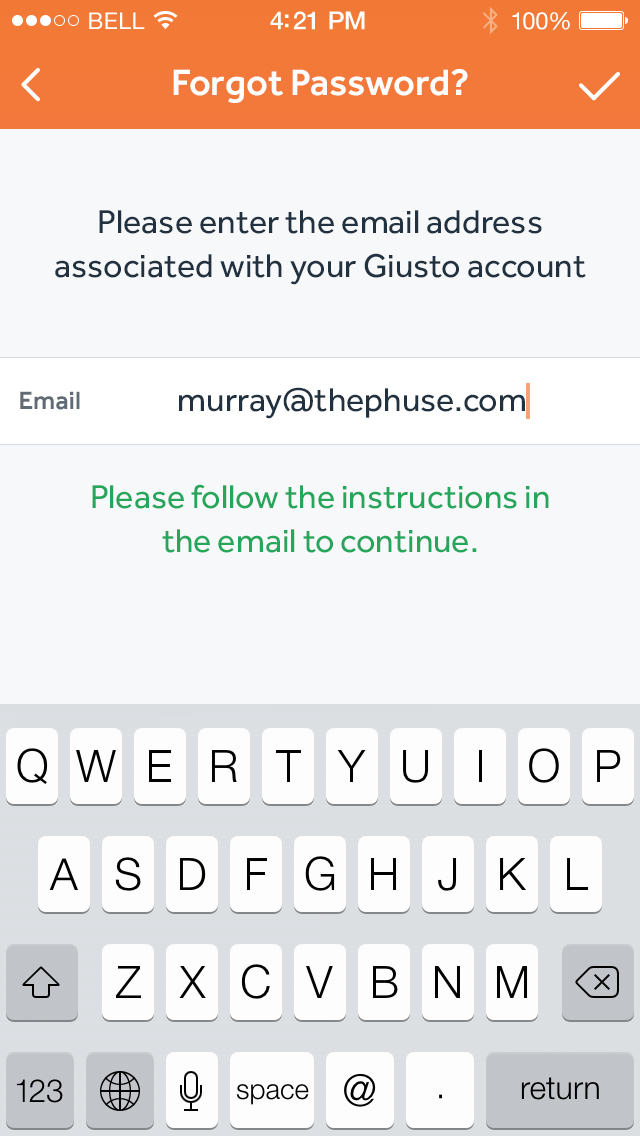
<style>
.page{position:relative;width:640px;height:1136px;background:#f6f8fa}
.page>*{position:absolute;margin:0}
.t1{font:23px "HelveticaNeue";letter-spacing:0.02em;color:#ffffff}
.t2{font:25px "HelveticaNeue-Medium";letter-spacing:-0.02em;color:#ffffff}
.t3{font:24px "HelveticaNeue";letter-spacing:-0.02em;color:#ffffff}
.t4{font:38px "Effra-Medium";color:#ffffff}
.t5{font:34px/44px "Effra-Regular";color:#22313f}
.t6{font:34px "Effra-Regular";color:#22313f}
.t7{font:26px "Effra-Medium";color:#626a73}
.t8{font:34px/44px "Effra-Regular";color:#26a65b}
</style>
<div class="page">
<p class="t1" style="left:89px;top:12px;width:56px;height:17px">BELL</p>
<p class="t2" style="left:270px;top:11px;width:95px;height:19px">4:21 PM</p>
<p class="t3" style="left:512px;top:12px;width:58px;height:18px">100%</p>
<p class="t4" style="left:173px;top:69px;width:295px;height:34px">Forgot Password?</p>
<p class="t5" style="left:55px;top:210px;width:531px;height:75px;text-align:center">Please enter the email address <br>associated with your Giusto account</p>
<p class="t6" style="left:179px;top:387px;width:346px;height:32px">murray@thephuse.com</p>
<p class="t7" style="left:20px;top:391px;width:60px;height:19px">Email</p>
<p class="t8" style="left:92px;top:484px;width:457px;height:69px;text-align:center">Please follow the instructions in <br>the email to continue.</p>
</div>
